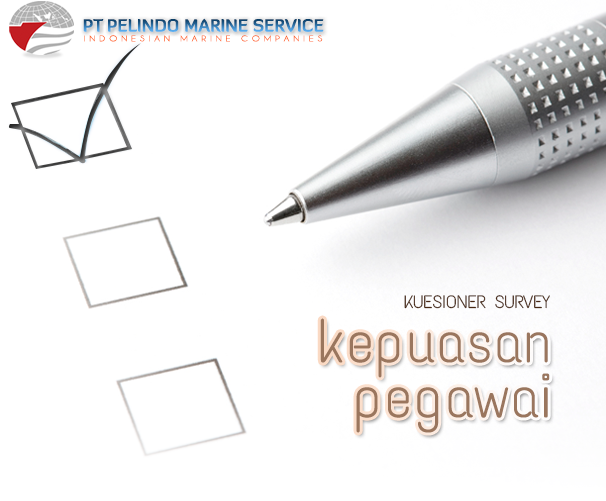
<style>
.page{position:relative;width:606px;height:501px;background:#ffffff}
.page>*{position:absolute;margin:0}
.t1{font:17.2px "DiavloBold-Regular";font-variant:small-caps}
.t2{font:8.4px "Champagne&Limousines";letter-spacing:0.375em;color:#ff6122;font-variant:small-caps;scale:1.25 1}
.t3{font:18px "TextMeOne-Regular";color:#472712}
.t4{font:60px/55px "TextMeOne-Regular";color:#9a765e}
</style>
<div class="page">
<p class="t1" style="left:83px;top:18px;width:241px;height:14px">PT PELINDO MARINE SERVICE</p>
<p class="t2" style="left:84px;top:35px;width:239px;height:7px">INDONESIAN MARINE COMPANIES</p>
<p class="t3" style="left:404px;top:295px;width:146px;height:14px">KUESIONER SURVEY</p>
<p class="t4" style="left:320px;top:318px;width:230px;height:115px;text-align:right">kepuasan<br>pegawai</p>
</div>
